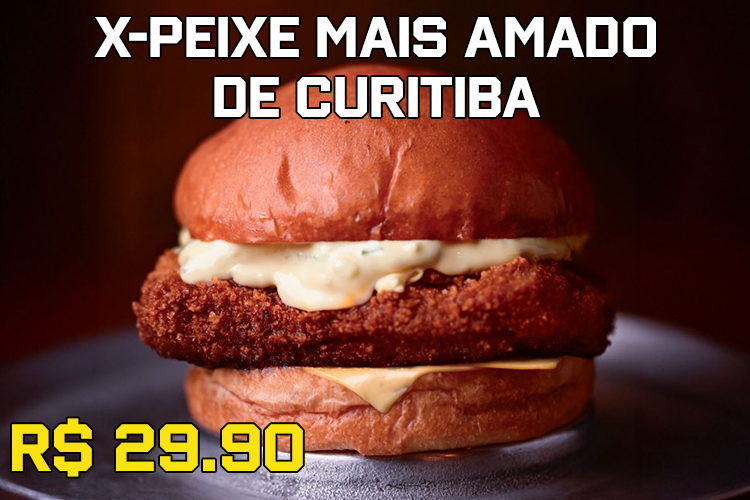
<style>
.page{position:relative;width:750px;height:500px}
.page>*{position:absolute;margin:0}
.t1{font:50px "WinnerSans-Bold";color:#ffffff}
.t2{font:58.3px "WinnerSans-Bold";color:#fae311}
</style>
<div class="page">
<p class="t1" style="left:94px;top:17px;width:562px;height:100px;text-align:center">x-peixe mais amado<br>de curitiba</p>
<p class="t2" style="left:12px;top:418px;width:291px;height:59px">R$ 29.90</p>
</div>
